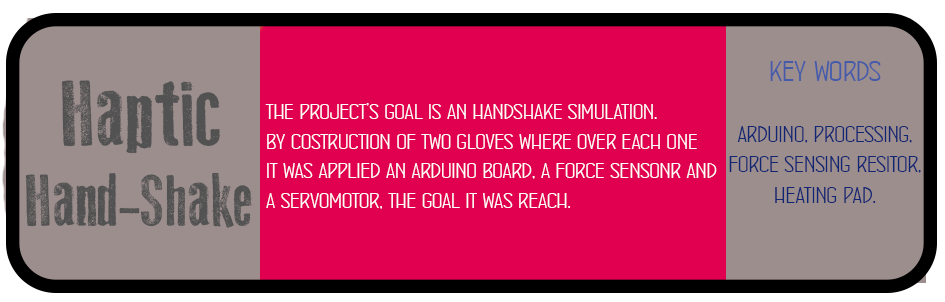
<style>
.page{position:relative;width:945px;height:302px;background:#e0004f}
.page>*{position:absolute;margin:0}
.t1{font:25.3px "ConcursoItalianBTNWide";color:#112672}
.t2{font:32px "ConcursoItalianBTNWide";color:#455baa}
.t3{font:26.7px "ConcursoItalianBTNWide";color:#112672}
.t4{font:93.3px "OldPress";color:#525252}
.t5{font:24.7px "ConcursoItalianBTNWide";color:#ffffff}
.t6{font:73.3px "OldPress";color:#525252}
</style>
<div class="page">
<p class="t1" style="left:729px;top:61px;width:192px;height:142px;text-align:center"><span class="t2">key words<br></span><br>arduino, processing,<br>force sensing resitor,<br>heating pad.<br><span class="t3"></span></p>
<p class="t4" style="left:61px;top:80px;width:159px;height:74px">Haptic</p>
<p class="t5" style="left:265px;top:103px;width:452px;height:106px">the project’s goal is an handshake simulation.<br>by costruction of two gloves where over each one<br>it was applied an arduino board, a force sensonr and<br>a servomotor, the goal it was reach.</p>
<p class="t6" style="left:25px;top:172px;width:228px;height:56px">Hand-Shake</p>
</div>
